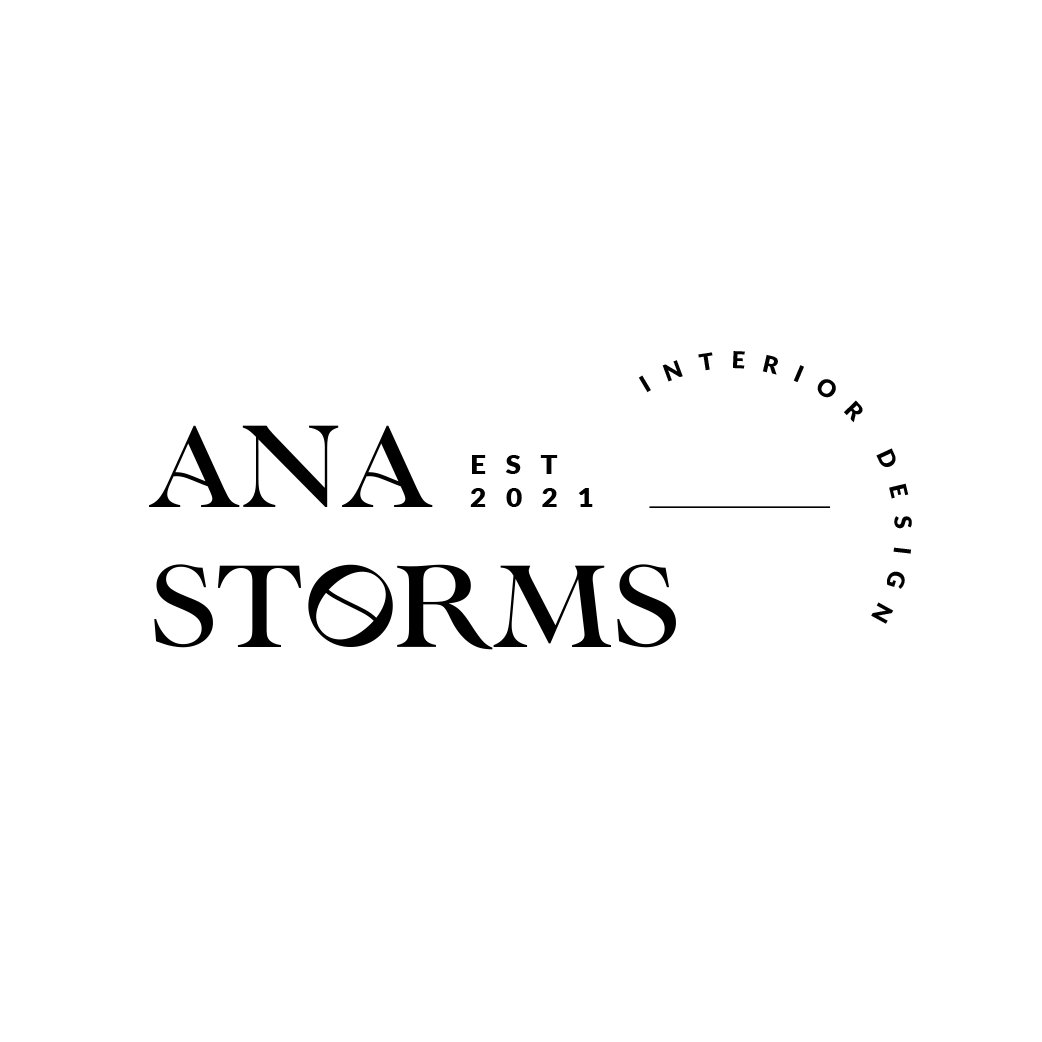
<style>
.page{position:relative;width:1042px;height:1042px;background:#ffffff}
.page>*{position:absolute;margin:0}
.t1{font:23.1px "Lato-Black";letter-spacing:0.7em;color:#000000;text-transform:uppercase}
.t2{font:116.4px "LorettoRegular";color:#000000;text-transform:uppercase}
.t3{font:27.3px "Lato-Black";letter-spacing:0.7em;color:#000000;text-transform:uppercase}
</style>
<div class="page">
<p class="t1" style="left:638px;top:351px;width:274px;height:273px;text-align:center">INTERIOR DESIGN</p>
<p class="t2" style="left:149px;top:425px;width:527px;height:225px">ANA<br>STORMS</p>
<p class="t3" style="left:470px;top:455px;width:123px;height:52px">EST<br>2021</p>
</div>
